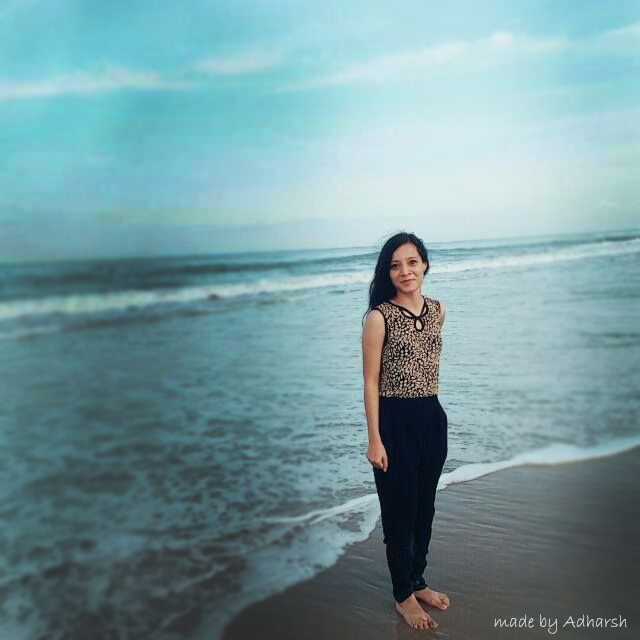
<style>
.page{position:relative;width:640px;height:640px}
.page>*{position:absolute;margin:0}
.t1{font:18px "BradleyHandITC";color:#d3d3d3}
</style>
<div class="page">
<p class="t1" style="left:494px;top:614px;width:133px;height:20px">made by Adharsh</p>
</div>
